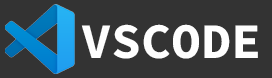
<style>
.page{position:relative;width:272px;height:78px;background:#333333}
.page>*{position:absolute;margin:0}
.t1{font:50px "SourceCodePro-Bold";color:#fefefe}
</style>
<div class="page">
<p class="t1" style="left:81px;top:24px;width:177px;height:35px">VSCODE</p>
</div>
